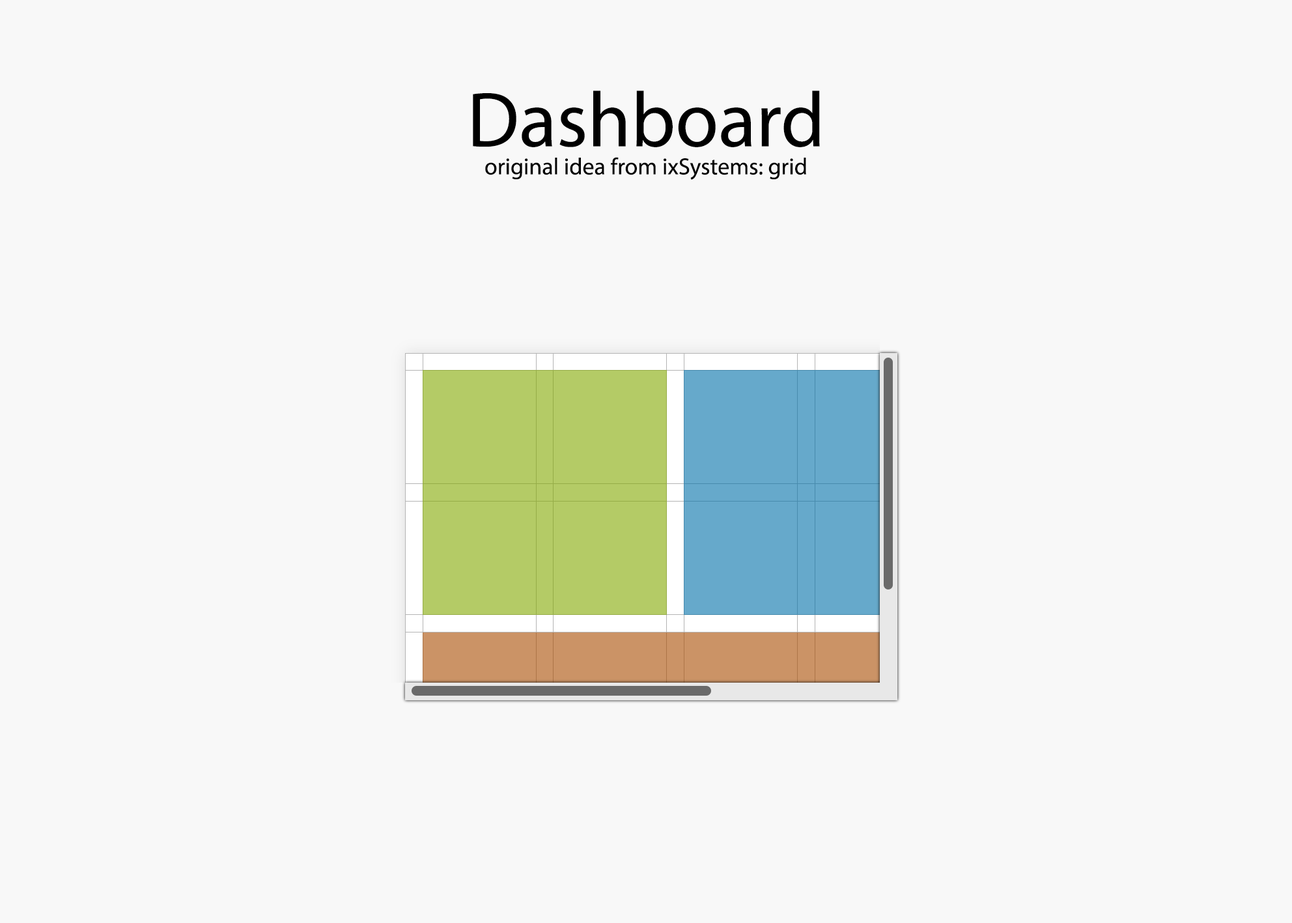
<style>
.page{position:relative;width:1292px;height:923px;background:#f8f8f8}
.page>*{position:absolute;margin:0}
.t1{font:23.4px "MyriadPro-Regular";color:#000000}
.t2{font:78.2px "MyriadPro-Regular";color:#000000}
</style>
<div class="page">
<p class="t1" style="left:473px;top:91px;width:347px;height:89px;text-align:center"><span class="t2">Dashboard<br></span>original idea from ixSystems: grid</p>
</div>
